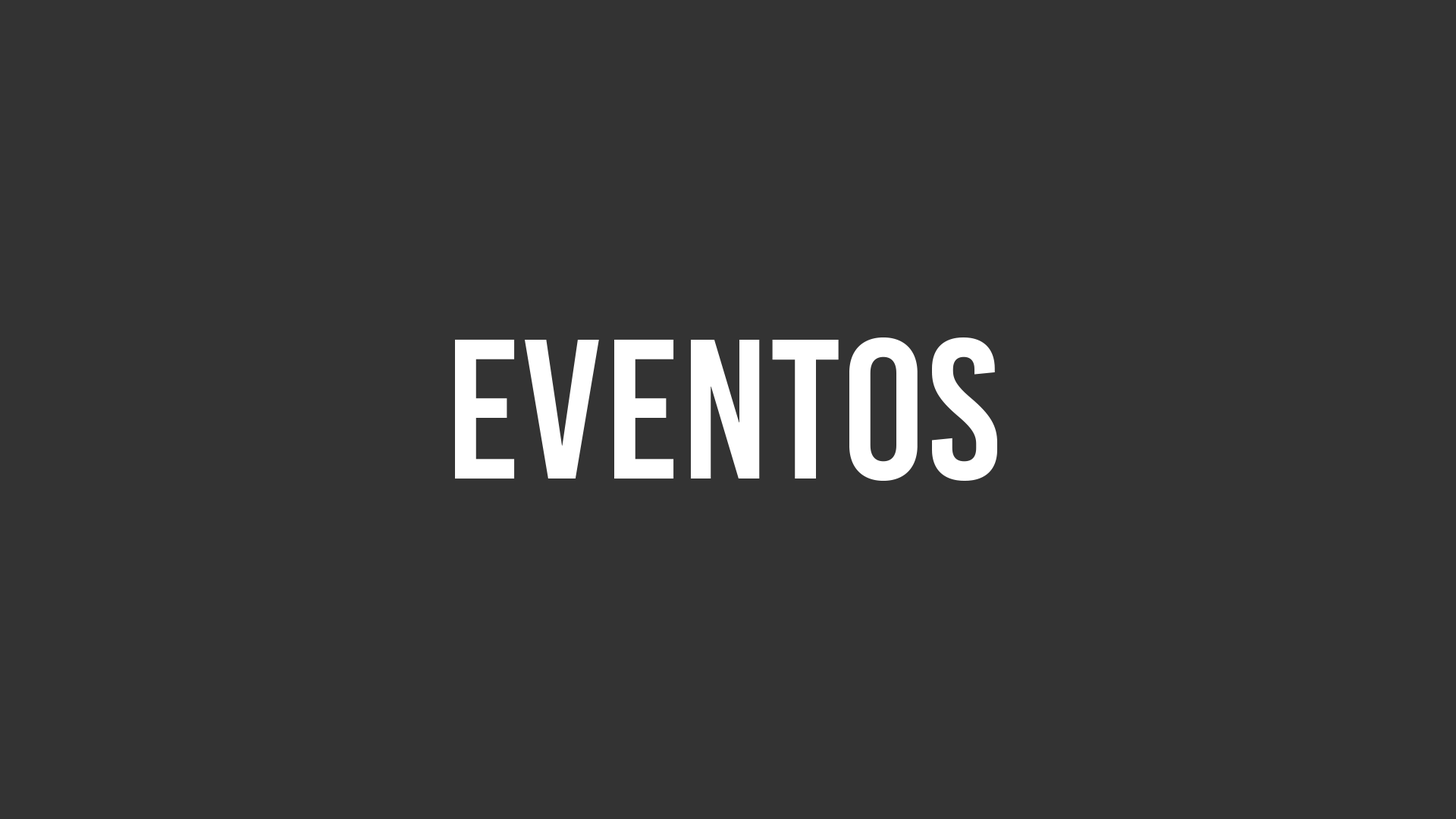
<style>
.page{position:relative;width:1456px;height:819px;background:#333333}
.page>*{position:absolute;margin:0}
.t1{font:198.6px "BebasKai";color:#ffffff}
</style>
<div class="page">
<p class="t1" style="left:455px;top:337px;width:542px;height:145px">Eventos</p>
</div>
